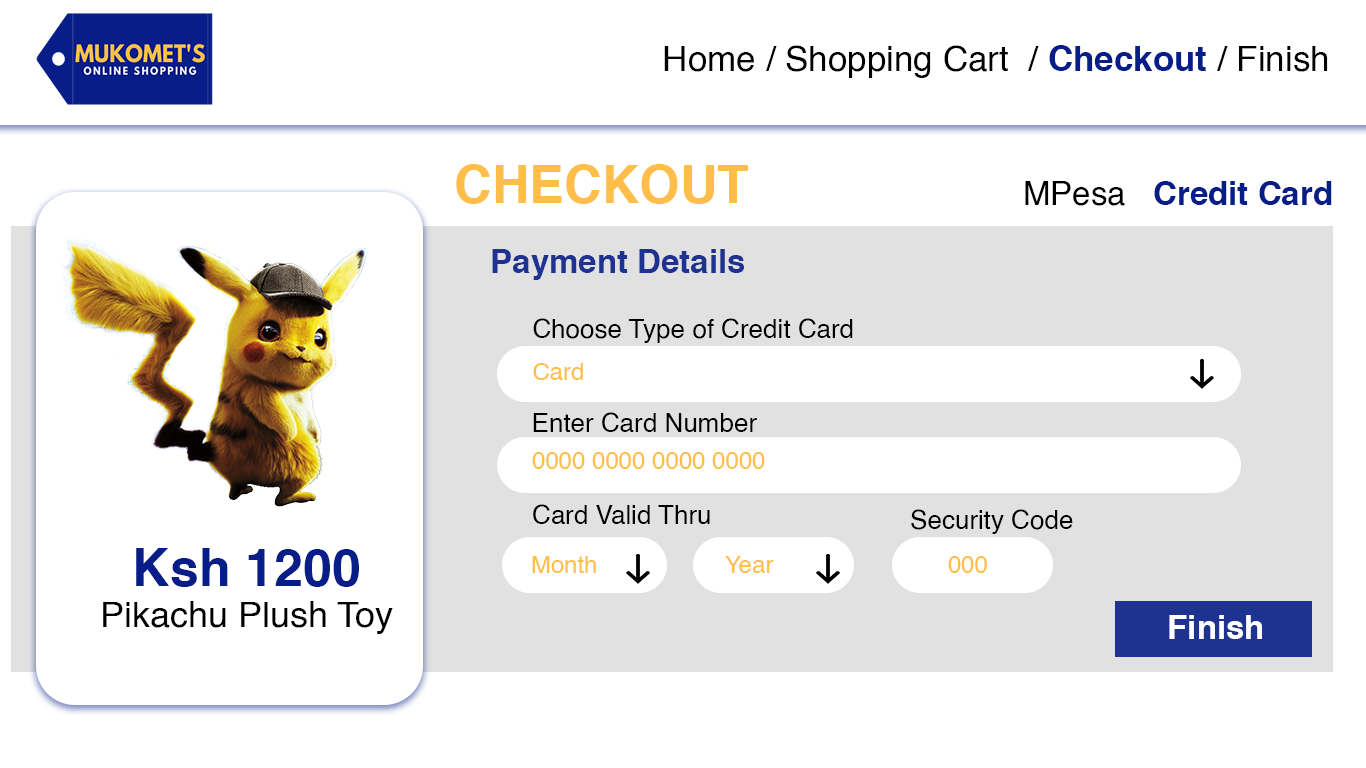
<style>
.page{position:relative;width:1366px;height:768px;background:#ffffff}
.page>*{position:absolute;margin:0}
.t1{font:35px "Helvetica";color:#010100}
.t2{font:35px "Helvetica-Bold";color:#071e89}
.t3{font:52px "Helvetica-Bold";color:#ffbd4a}
.t4{font:33px "Helvetica-Bold";color:#071e89}
.t5{font:33px "Helvetica";color:#000000}
.t6{font:33px "Helvetica-Bold";color:#1e3292}
.t7{font:26px "Helvetica";color:#000000}
.t8{font:24px "Helvetica";color:#ffbd4a}
.t9{font:52px "Helvetica-Bold";color:#071e89}
.t10{font:36px "Helvetica";color:#000000}
.t11{font:33px "Helvetica-Bold";color:#ffffff}
</style>
<div class="page">
<p class="t1" style="left:664px;top:45px;width:664px;height:33px">Home / Shopping Cart  / <span class="t2">Checkout </span>/ Finish</p>
<p class="t3" style="left:456px;top:164px;width:293px;height:40px">CHECKOUT</p>
<p class="t4" style="left:1025px;top:181px;width:307px;height:25px"><span class="t5">MPesa   </span>Credit Card</p>
<p class="t6" style="left:492px;top:249px;width:252px;height:31px">Payment Details</p>
<p class="t7" style="left:533px;top:318px;width:320px;height:25px">Choose Type of Credit Card</p>
<p class="t8" style="left:533px;top:363px;width:50px;height:17px">Card</p>
<p class="t7" style="left:533px;top:412px;width:224px;height:20px">Enter Card Number</p>
<p class="t8" style="left:532px;top:452px;width:233px;height:17px">0000 0000 0000 0000</p>
<p class="t7" style="left:533px;top:504px;width:177px;height:20px">Card Valid Thru</p>
<p class="t7" style="left:911px;top:509px;width:162px;height:25px">Security Code</p>
<p class="t9" style="left:136px;top:548px;width:223px;height:39px">Ksh 1200</p>
<p class="t8" style="left:532px;top:556px;width:64px;height:17px">Month</p>
<p class="t8" style="left:725px;top:556px;width:49px;height:17px">Year</p>
<p class="t8" style="left:948px;top:556px;width:39px;height:17px">000</p>
<p class="t10" style="left:103px;top:601px;width:290px;height:33px">Pikachu Plush Toy</p>
<p class="t11" style="left:1169px;top:615px;width:93px;height:24px">Finish</p>
</div>
